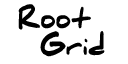
<style>
.page{position:relative;width:128px;height:64px;background:#ffffff}
.page>*{position:absolute;margin:0}
.t1{font:26px/27px "DanielBlack";color:#000000;scale:0.9 1}
</style>
<div class="page">
<p class="t1" style="left:18px;top:4px;width:87px;height:53px;text-align:center">Root<br>   Grid</p>
</div>
